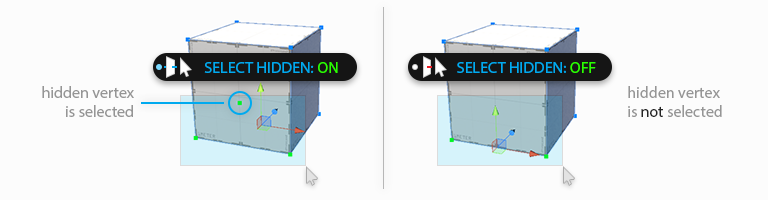
<style>
.page{position:relative;width:768px;height:200px;background:#fcfcfc}
.page>*{position:absolute;margin:0}
.t1{font:12px "MyriadPro-Regular";color:#00aaef;text-transform:uppercase}
.t2{font:12px "MyriadPro-Regular";color:#2aff00;text-transform:uppercase}
.t3{font:12px "MyriadPro-Regular";color:#959595}
.t4{font:12px "MyriadPro-Regular";color:#252525}
</style>
<div class="page">
<p class="t1" style="left:204px;top:62px;width:134px;height:11px">Select hidden: <span class="t2">on</span></p>
<p class="t1" style="left:457px;top:62px;width:139px;height:11px">Select hidden: <span class="t2">OFF</span></p>
<p class="t3" style="left:42px;top:86px;width:92px;height:31px;text-align:right">hidden vertex<br>is selected</p>
<p class="t3" style="left:628px;top:86px;width:94px;height:31px">hidden vertex<br>is <span class="t4">not </span>selected</p>
</div>
